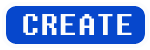
<style>
.page{position:relative;width:150px;height:50px;background:#0647cc}
.page>*{position:absolute;margin:0}
.t1{font:30px "Fixedsys";color:#fbfcfd}
</style>
<div class="page">
<p class="t1" style="left:23px;top:14px;width:109px;height:21px">CREATE</p>
</div>
